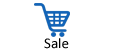
<style>
.page{position:relative;width:114px;height:50px;background:#ffffff}
.page>*{position:absolute;margin:0}
.t1{font:14.5px "Calibri";color:#000000;scale:1.03 1}
</style>
<div class="page">
<p class="t1" style="left:44px;top:38px;width:25px;height:11px">Sale</p>
</div>
